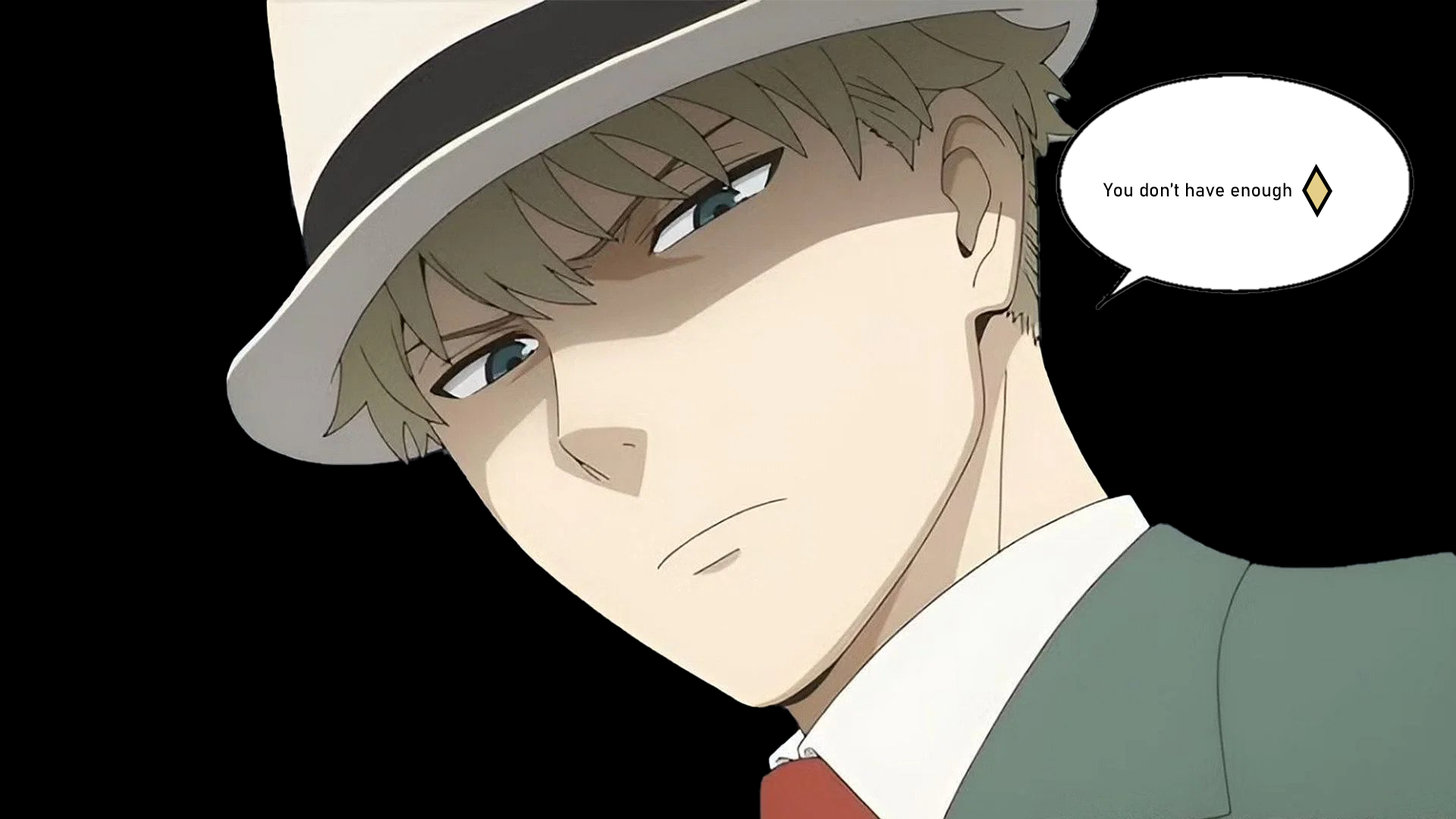
<style>
.page{position:relative;width:1456px;height:819px;background:#000000}
.page>*{position:absolute;margin:0}
.t1{font:19px "Bahnschrift";color:#000000}
</style>
<div class="page">
<p class="t1" style="left:1103px;top:183px;width:188px;height:18px">You don’t have enough</p>
</div>
